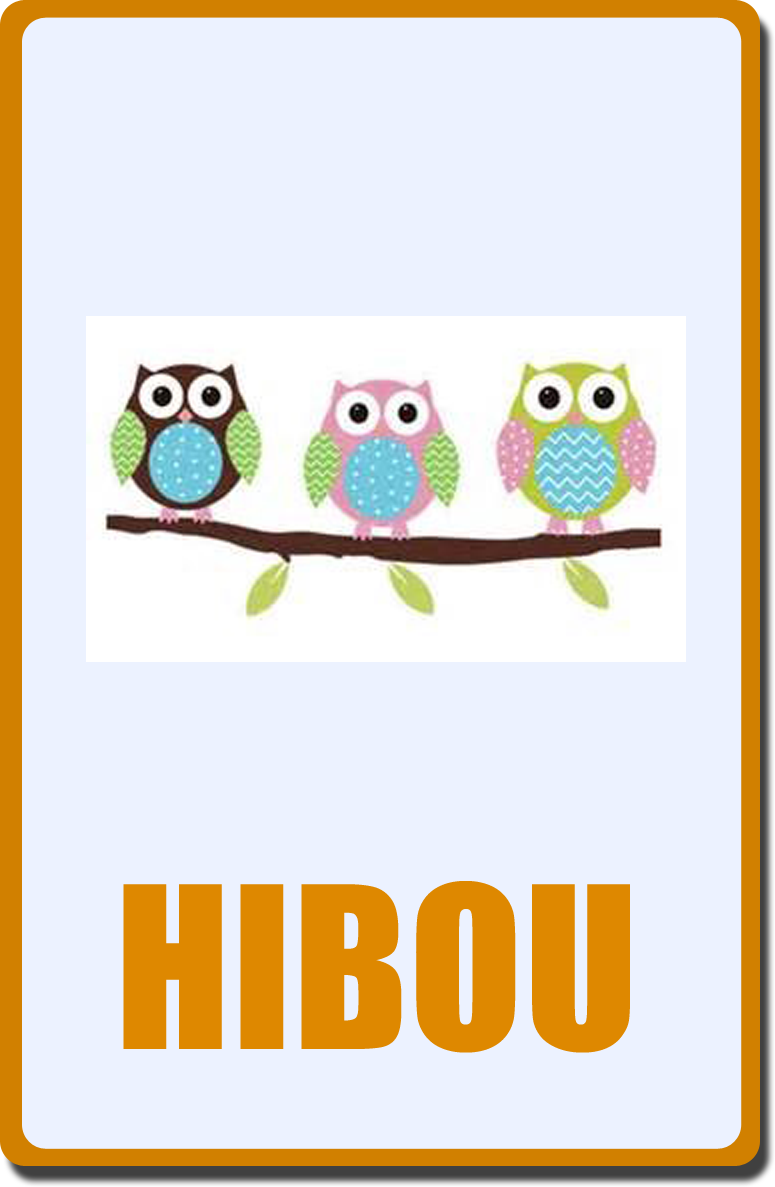
<style>
.page{position:relative;width:775px;height:1187px;background:#ecf2ff}
.page>*{position:absolute;margin:0}
.t1{font:208.3px "Impact";letter-spacing:0.005em;color:#de8800}
</style>
<div class="page">
<p class="t1" style="left:123px;top:881px;width:507px;height:172px">HIBOU</p>
</div>
